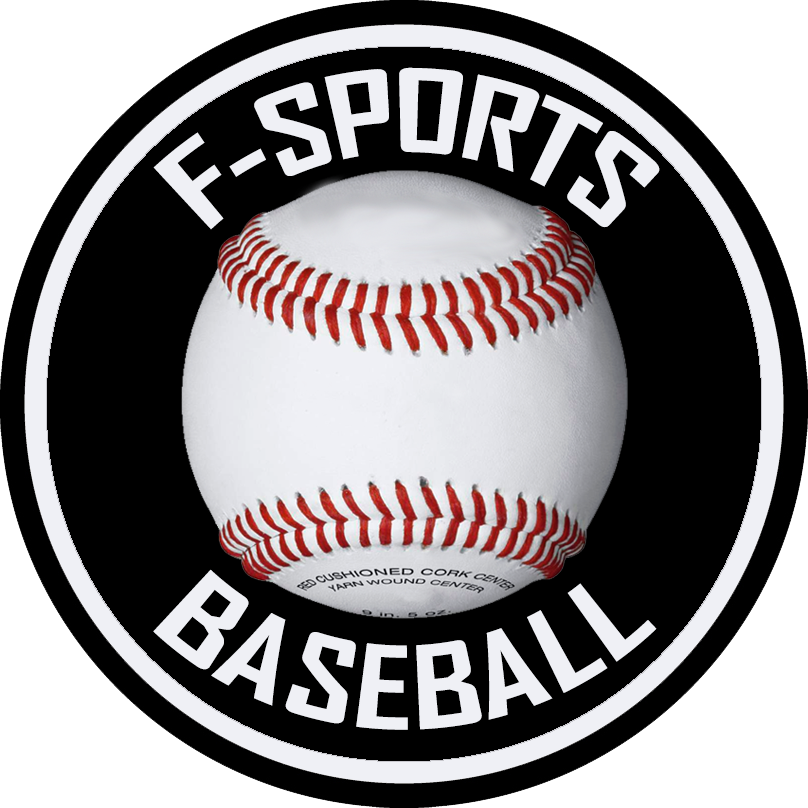
<style>
.page{position:relative;width:808px;height:808px;background:#000000}
.page>*{position:absolute;margin:0}
.t1{font:110px "AgencyFB-Bold";color:#eff0f5}
</style>
<div class="page">
<p class="t1" style="left:153px;top:67px;width:507px;height:163px">F-SPORTS</p>
<p class="t1" style="left:153px;top:569px;width:504px;height:161px">BASEBALL</p>
</div>
